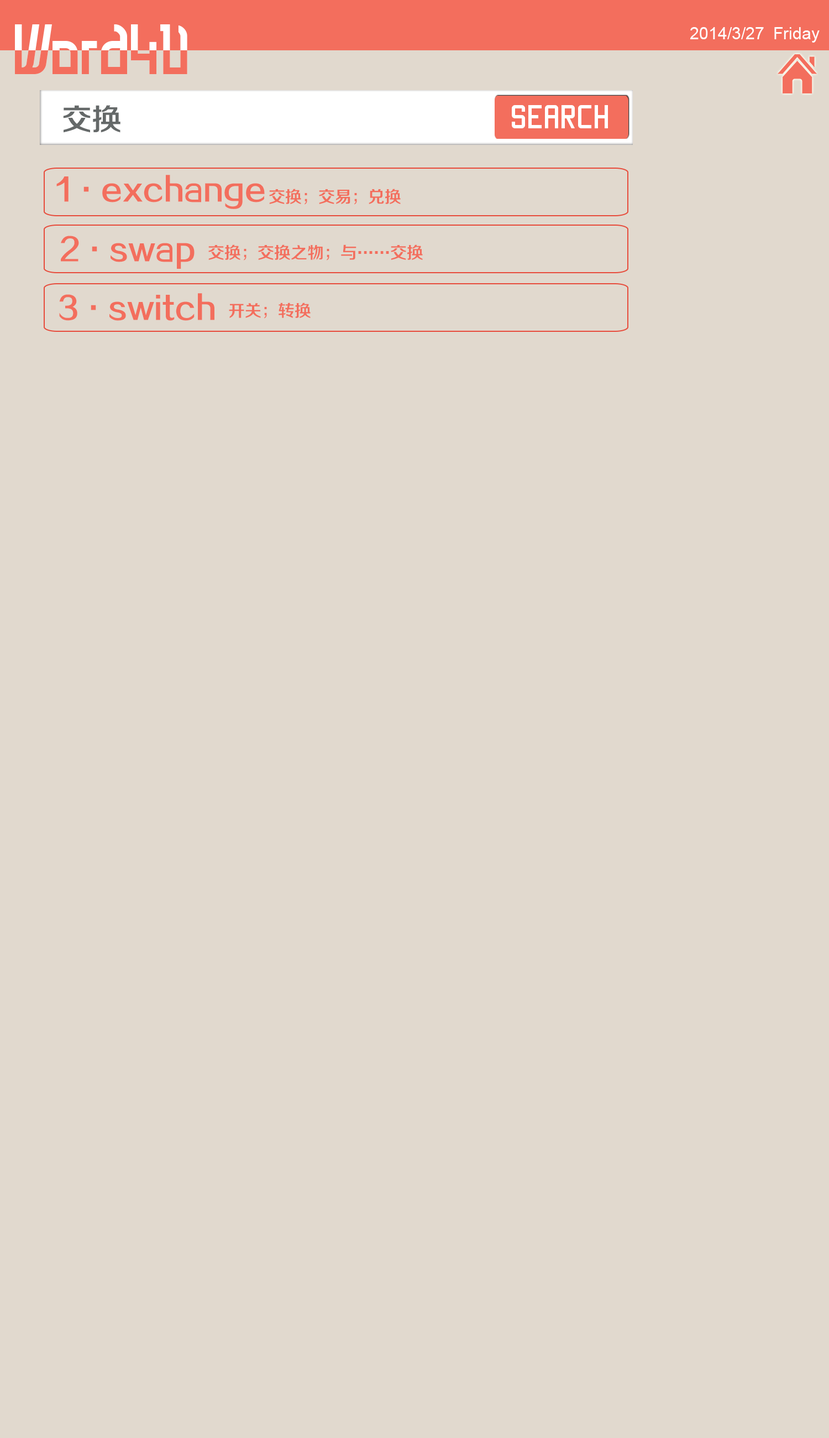
<style>
.page{position:relative;width:829px;height:1438px;background:#e1d9ce}
.page>*{position:absolute;margin:0}
.t1{font:16.6px "ArialMT";color:#ffffff}
.t2{font:29.9px "FZZZHONGJW--GB1-0";color:#656969}
.t3{font:26.5px "Manteka";color:#ffffff}
.t4{font:29.9px "FZZZHONGJW--GB1-0";color:#f36e5d}
.t5{font:16.6px "FZZZHONGJW--GB1-0";color:#f36e5d}
</style>
<div class="page">
<p class="t1" style="left:690px;top:27px;width:130px;height:16px">2014/3/27  Friday</p>
<p class="t2" style="left:63px;top:105px;width:58px;height:28px">交换</p>
<p class="t3" style="left:512px;top:105px;width:96px;height:23px">search</p>
<p class="t4" style="left:56px;top:175px;width:209px;height:34px">1·exchange</p>
<p class="t5" style="left:269px;top:189px;width:132px;height:16px">交换；交易；兑换</p>
<p class="t4" style="left:61px;top:236px;width:134px;height:33px">2·swap</p>
<p class="t5" style="left:208px;top:244px;width:215px;height:16px">交换；交换之物；与……交换</p>
<p class="t4" style="left:59px;top:293px;width:156px;height:28px">3·switch</p>
<p class="t5" style="left:229px;top:302px;width:82px;height:16px">开关；转换</p>
</div>
